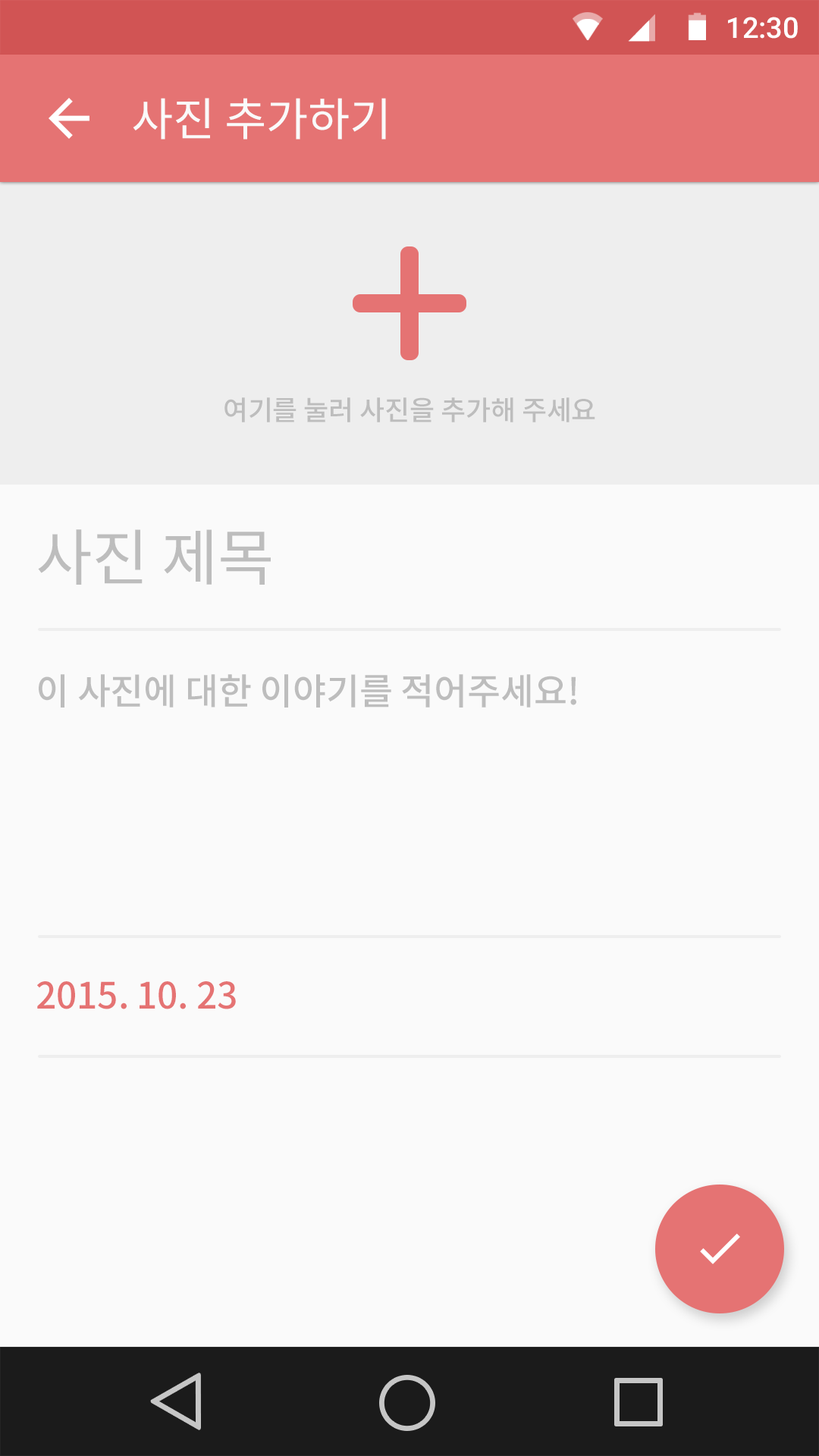
<style>
.page{position:relative;width:819px;height:1456px;background:#fafafa}
.page>*{position:absolute;margin:0}
.t1{font:28.8px "Roboto-Medium";color:#ffffff}
.t2{font:45.5px "NotoSansCJKkr-Regular";letter-spacing:-0.005em;color:#fafafa}
.t3{font:27.3px "NotoSansCJKkr-Medium";letter-spacing:-0.005em;color:#bdbdbd}
.t4{font:61.4px "NotoSansCJKkr-Regular";letter-spacing:-0.005em;color:#bdbdbd}
.t5{font:36.4px "NotoSansCJKkr-Medium";letter-spacing:-0.005em;color:#bdbdbd}
.t6{font:36.4px "NotoSansCJKkr-Medium";letter-spacing:-0.005em;color:#e57373}
</style>
<div class="page">
<p class="t1" style="left:728px;top:17px;width:70px;height:22px">12:30</p>
<p class="t2" style="left:133px;top:98px;width:253px;height:42px">사진 추가하기</p>
<p class="t3" style="left:224px;top:397px;width:371px;height:25px">여기를 눌러 사진을 추가해 주세요</p>
<p class="t4" style="left:38px;top:529px;width:233px;height:56px">사진 제목</p>
<p class="t5" style="left:39px;top:674px;width:537px;height:34px">이 사진에 대한 이야기를 적어주세요!</p>
<p class="t6" style="left:37px;top:981px;width:199px;height:28px">2015. 10. 23</p>
</div>
